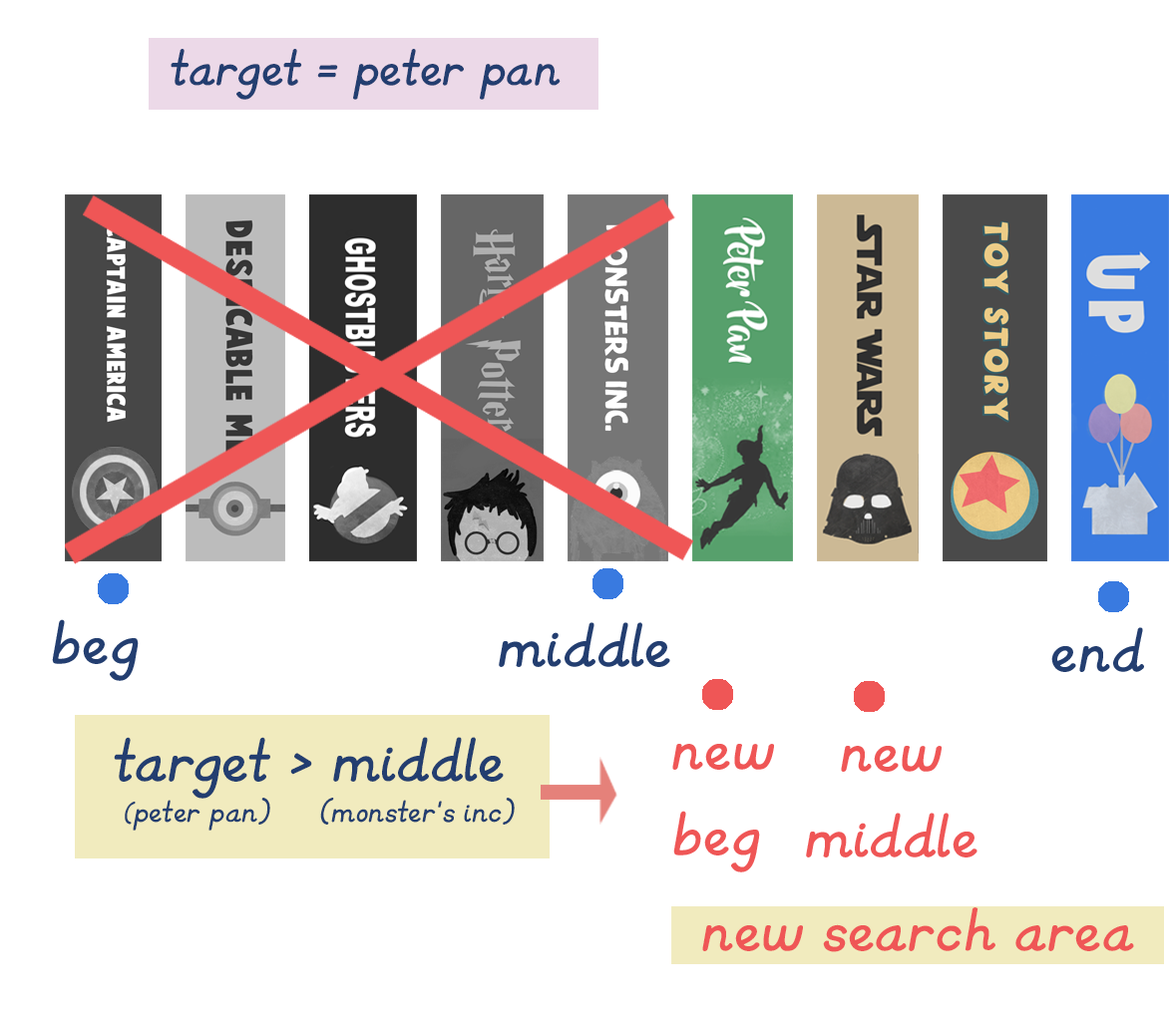
<style>
.page{position:relative;width:1169px;height:1020px;background:#ffffff}
.page>*{position:absolute;margin:0}
.t1{font:59.8px "KGPrimaryItalics";color:#233e70}
.t2{font:71.8px "KGPrimaryItalics";color:#233e70}
.t3{font:71.8px "KGPrimaryItalics";color:#ef5656}
.t4{font:35.9px "KGPrimaryItalics";color:#233e70}
.t5{font:29.9px "KGPrimaryItalics";color:#233e70}
</style>
<div class="page">
<p class="t1" style="left:171px;top:49px;width:389px;height:51px">target = peter pan</p>
<p class="t2" style="left:52px;top:619px;width:87px;height:62px">beg</p>
<p class="t2" style="left:499px;top:622px;width:171px;height:45px">middle</p>
<p class="t2" style="left:1051px;top:627px;width:93px;height:45px">end</p>
<p class="t2" style="left:114px;top:737px;width:390px;height:62px">target &gt; middle</p>
<p class="t3" style="left:672px;top:744px;width:102px;height:129px">new<br>beg</p>
<p class="t3" style="left:806px;top:746px;width:171px;height:112px;text-align:center">new<br>middle</p>
<p class="t4" style="left:125px;top:798px;width:145px;height:33px"><span class="t5">(</span>peter pan)</p>
<p class="t4" style="left:320px;top:798px;width:195px;height:27px">(monster’s inc)</p>
<p class="t3" style="left:702px;top:908px;width:432px;height:44px">new search area</p>
</div>
